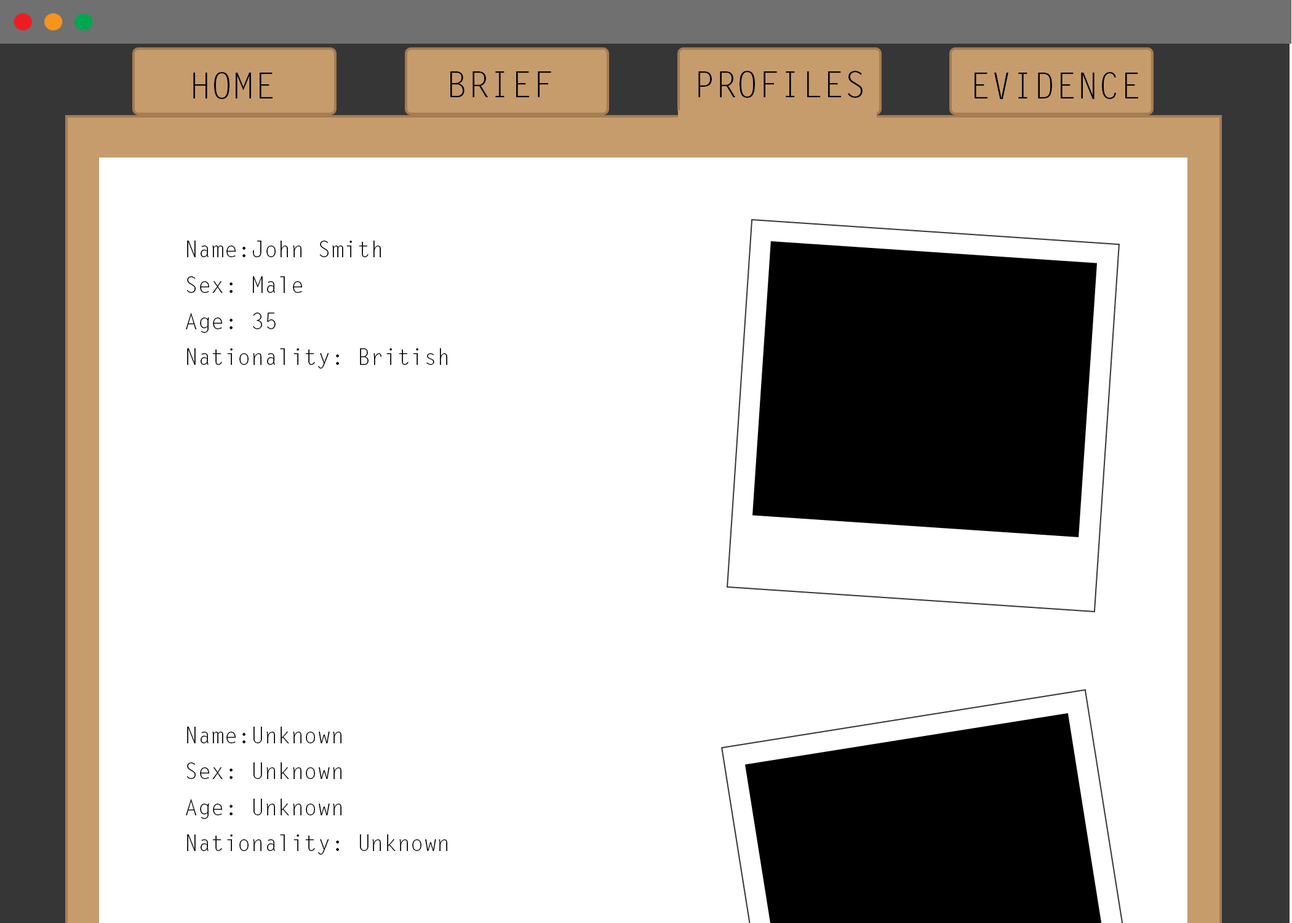
<style>
.page{position:relative;width:1292px;height:923px;background:#ffffff}
.page>*{position:absolute;margin:0}
.t1{font:35.9px "LetterGothicStd";color:#000000}
.t2{font:22.1px/35.9px "LetterGothicStd";color:#000000}
</style>
<div class="page">
<p class="t1" style="left:193px;top:72px;width:80px;height:27px">HOME</p>
<p class="t1" style="left:450px;top:71px;width:101px;height:26px">BRIEF</p>
<p class="t1" style="left:698px;top:71px;width:165px;height:27px">PROFILES</p>
<p class="t1" style="left:975px;top:72px;width:163px;height:27px">EVIDENCE</p>
<p class="t2" style="left:186px;top:241px;width:261px;height:128px">Name:John Smith<br>Sex: Male<br>Age: 35<br>Nationality: British</p>
<p class="t2" style="left:186px;top:727px;width:261px;height:128px">Name:Unknown<br>Sex: Unknown<br>Age: Unknown<br>Nationality: Unknown</p>
</div>
